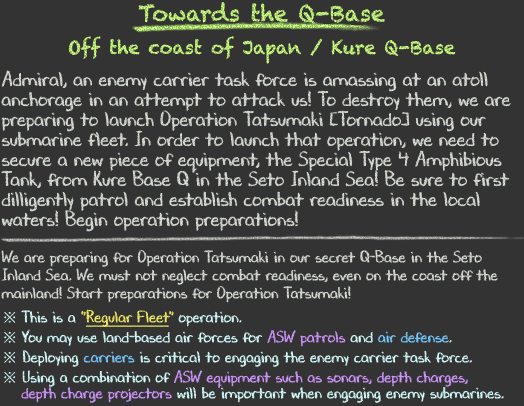
<style>
.page{position:relative;width:524px;height:406px;background:#333333}
.page>*{position:absolute;margin:0}
.t1{font:18px/36px "Chalkduster"}
.t2{font:22px/36px "Chalkduster"}
.t3{font:20px/20px "DJBChalkItUp";color:#d9ded6}
.t4{font:16px/18px "DJBChalkItUp";color:#d9ded6}
.t5{font:16px/24px "DJBChalkItUp";color:#d9ded6}
.t6{font:16px/20px "TimesNewRomanPSMT";color:#d7feff}
.t7{font:16px/20px "DJBChalkItUp";color:#d7feff}
.t8{font:16px/20px "DJBChalkItUp";color:#f5ed68}
.t9{font:16px/20px "DJBChalkItUp";color:#f5ed68;text-decoration:underline}
.t10{font:16px/16px "TimesNewRomanPSMT";color:#d7feff}
.t11{font:16px/16px "DJBChalkItUp";color:#d7feff}
.t12{font:16px/16px "DJBChalkItUp";color:#d298ff}
.t13{font:16px/16px "DJBChalkItUp";color:#77cbff}
.t14{font:16px/20px "DJBChalkItUp";color:#77cbff}
</style>
<div class="page">
<p class="t1" style="left:68px;top:2px;width:388px;height:62px;text-align:center"><span class="t2">Towards the Q-Base<br></span>Off the coast of Japan / Kure Q-Base</p>
<p class="t3" style="left:1px;top:70px;width:510px;height:333px">Admiral, an enemy carrier task force is amassing at an atoll<br>anchorage in an attempt to attack us! To destroy them, we are<br>preparing to launch Operation Tatsumaki [Tornado] using our<br>submarine fleet. In order to launch that operation, we need to<br>secure a new piece of equipment, the Special Type 4 Amphibious<br>Tank, from Kure Base Q in the Seto Inland Sea! Be sure to first<br>dilligently patrol and establish combat readiness in the local<br>waters! Begin operation preparations!<br><br><span class="t4">We are preparing for Operation Tatsumaki in our secret Q-Base in the Seto<br>Inland Sea. We must not neglect combat readiness, even on the coast off the<br>mainland! Start preparations for Operation Tatsumaki</span><span class="t5">!<br></span><span class="t6">※ </span><span class="t7">This is a </span><span class="t8">"</span><span class="t9">Regular Fleet</span><span class="t8">"</span><span class="t7"> operation.<br></span><span class="t10">※ </span><span class="t11">You may use land-based air forces for </span><span class="t12">ASW patrols</span><span class="t11"> and </span><span class="t13">air defense</span><span class="t7">.<br></span><span class="t6">※</span><span class="t7"> Deploying </span><span class="t14">carriers</span><span class="t7"> is critical to engaging the enemy carrier task force.<br></span><span class="t10">※</span><span class="t11"> Using a combination of </span><span class="t12">ASW equipment such as sonars, depth charges,<br>　 depth charge projectors</span><span class="t11"> will be important when engaging enemy submarines.</span></p>
</div>
